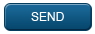
<style>
.page{position:relative;width:95px;height:34px;background:#ffffff}
.page>*{position:absolute;margin:0}
.t1{font:12px "ArialMT";color:#ffffff}
</style>
<div class="page">
<p class="t1" style="left:31px;top:12px;width:33px;height:9px">SEND</p>
</div>
